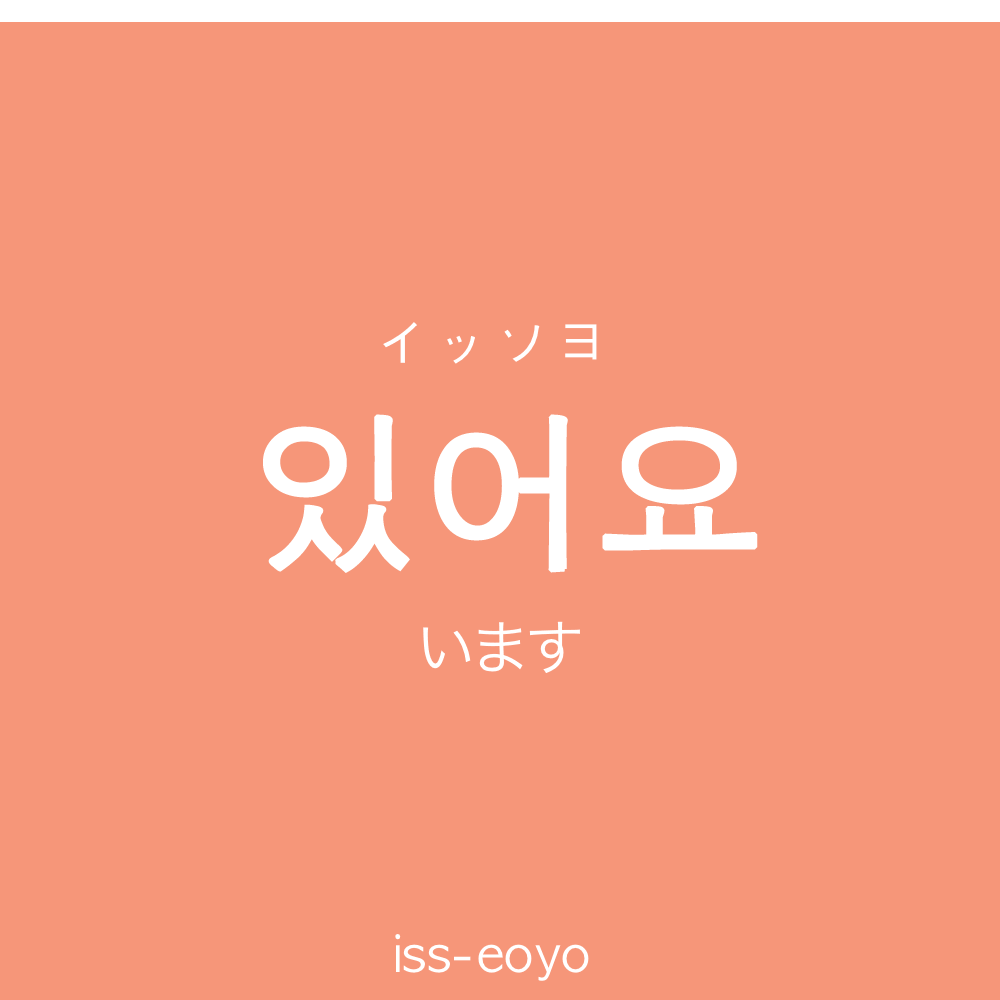
<style>
.page{position:relative;width:1000px;height:1000px;background:#f69679}
.page>*{position:absolute;margin:0}
.t1{font:60px "AppleGothic";color:#ffffff}
.t2{font:170px "AppleGothic";color:#ffffff;font-weight:bold}
.t3{font:60px "HiraKakuProN-W3";color:#ffffff}
.t4{font:50px "AppleGothic";color:#ffffff}
</style>
<div class="page">
<p class="t1" style="left:383px;top:322px;width:214px;height:42px">イッソヨ</p>
<p class="t2" style="left:263px;top:414px;width:495px;height:159px">있어요</p>
<p class="t3" style="left:423px;top:621px;width:157px;height:52px">います</p>
<p class="t4" style="left:395px;top:934px;width:194px;height:47px">iss-eoyo</p>
</div>
